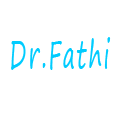
<style>
.page{position:relative;width:113px;height:113px;background:#ffffff}
.page>*{position:absolute;margin:0}
.t1{font:37.7px "SegoePrint";letter-spacing:0.1em;color:#00ccff;scale:0.55 1}
</style>
<div class="page">
<p class="t1" style="left:11px;top:37px;width:100px;height:33px">Dr.Fathi</p>
</div>
